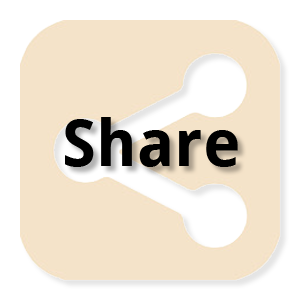
<style>
.page{position:relative;width:300px;height:300px;background:#f4e3c9}
.page>*{position:absolute;margin:0}
.t1{font:112px "DroidSans-Bold";color:#000000}
</style>
<div class="page">
<p class="t1" style="left:65px;top:117px;width:173px;height:50px">Share</p>
</div>
